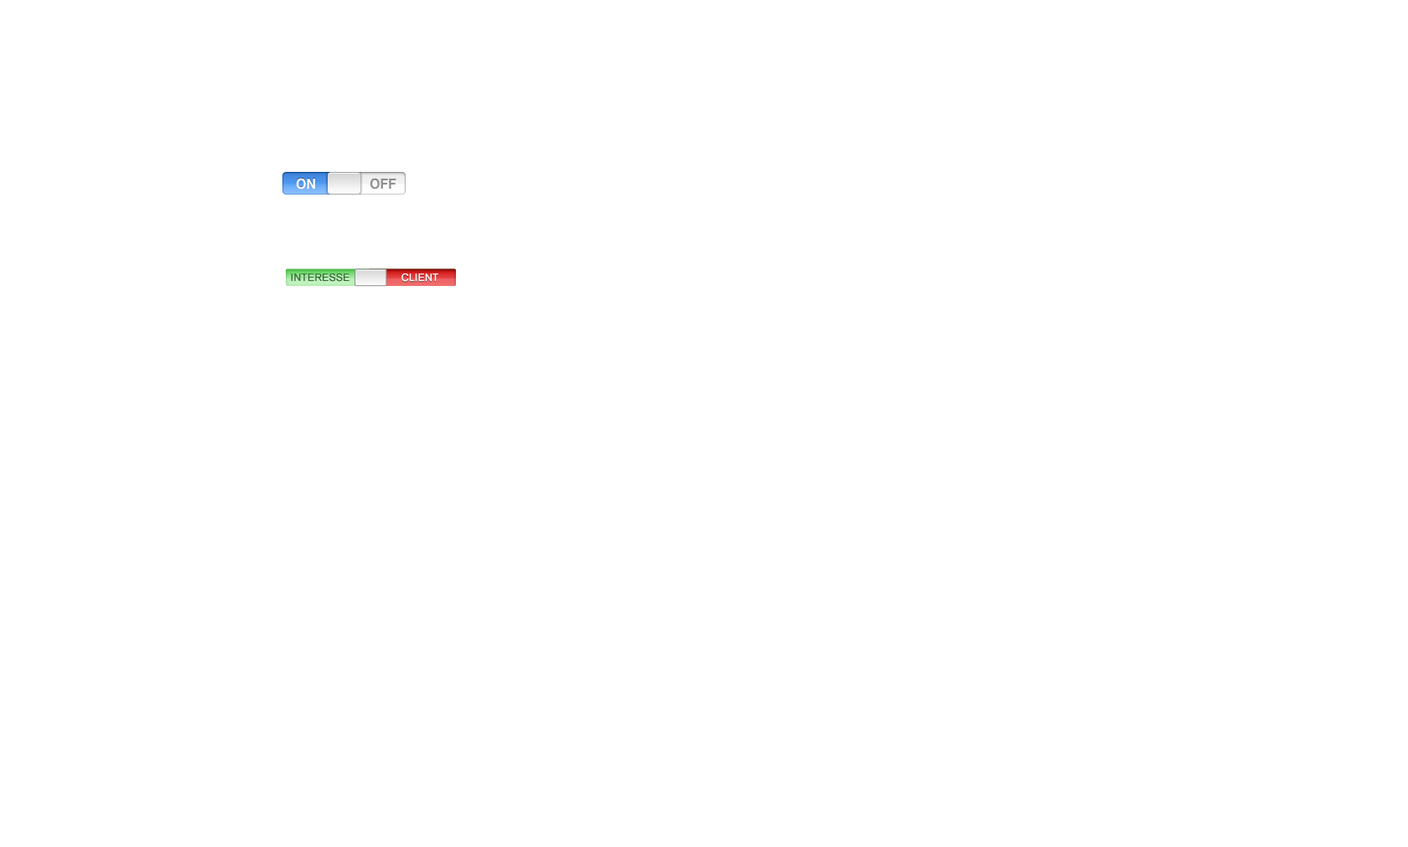
<style>
.page{position:relative;width:1408px;height:847px;background:#ffffff}
.page>*{position:absolute;margin:0}
.t1{font:10.1px "ArialMT";color:#376f35;font-weight:bold}
.t2{font:10.1px "ArialMT";color:#ffffff;font-weight:bold}
</style>
<div class="page">
<p class="t1" style="left:291px;top:273px;width:59px;height:9px">INTERESSE</p>
<p class="t2" style="left:402px;top:273px;width:36px;height:9px">CLIENT</p>
</div>
